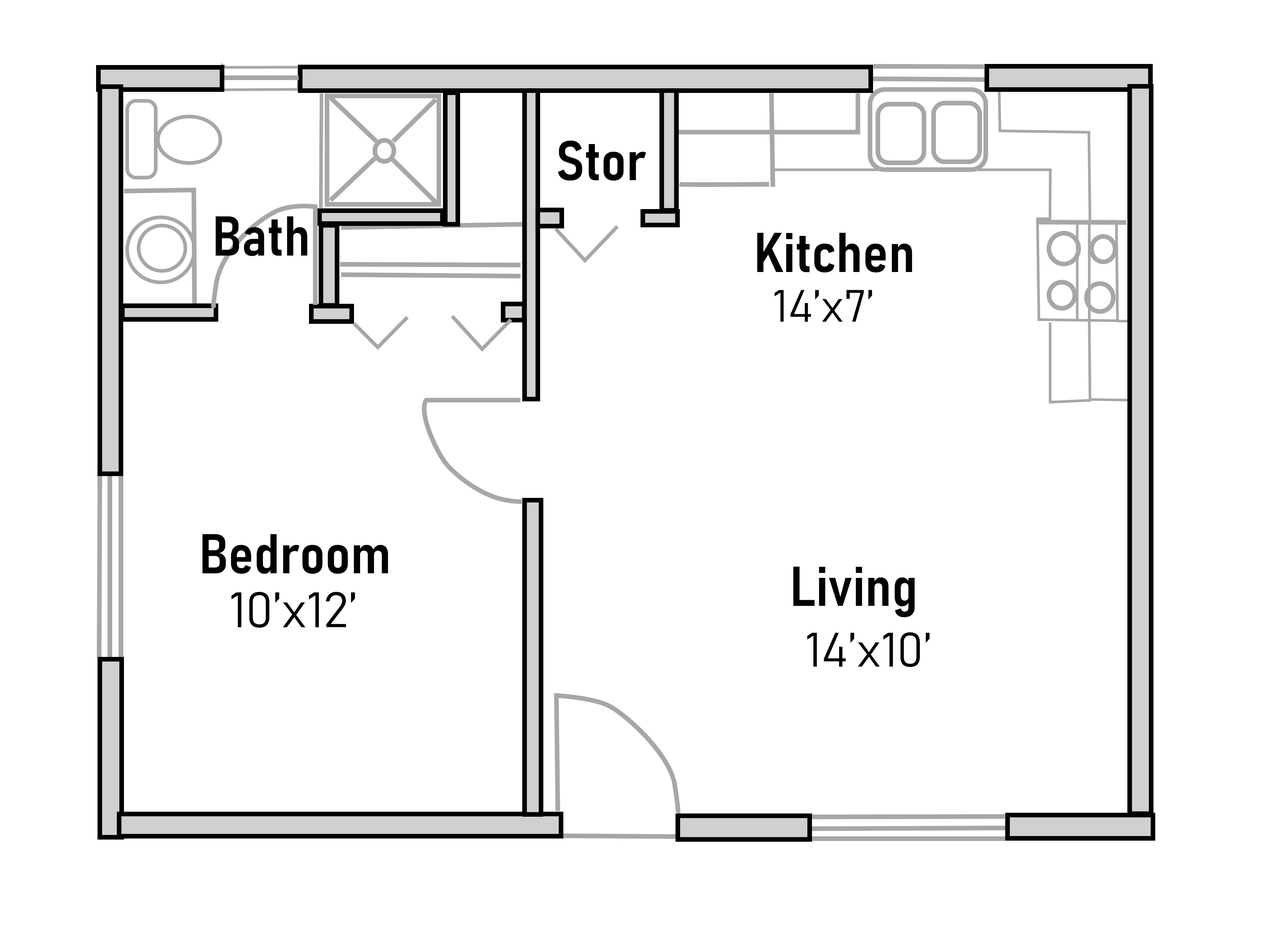
<style>
.page{position:relative;width:1276px;height:935px;background:#ffffff}
.page>*{position:absolute;margin:0}
.t1{font:55.1px "Bahnschrift-SemiBoldSemiCondensed";color:#000000}
.t2{font:44.7px "Bahnschrift-Light";color:#000000}
.t3{font:49.1px "Bahnschrift-Light";color:#000000}
.t4{font:47.6px "Bahnschrift-Light";color:#000000}
</style>
<div class="page">
<p class="t1" style="left:558px;top:140px;width:88px;height:41px">Stor</p>
<p class="t1" style="left:215px;top:216px;width:93px;height:40px">Bath</p>
<p class="t1" style="left:757px;top:233px;width:155px;height:40px">Kitchen</p>
<p class="t2" style="left:774px;top:290px;width:98px;height:32px">14’x7’</p>
<p class="t1" style="left:202px;top:534px;width:186px;height:40px">Bedroom</p>
<p class="t1" style="left:793px;top:566px;width:122px;height:51px">Living</p>
<p class="t3" style="left:231px;top:592px;width:124px;height:36px">10’x12’</p>
<p class="t4" style="left:807px;top:632px;width:123px;height:35px">14’x10’</p>
</div>
